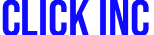
<style>
.page{position:relative;width:154px;height:35px;background:#ffffff}
.page>*{position:absolute;margin:0}
.t1{font:52px "BebasNeue-Regular";color:#100aff}
</style>
<div class="page">
<p class="t1" style="left:2px;top:0px;width:147px;height:37px">CLICK INC</p>
</div>
